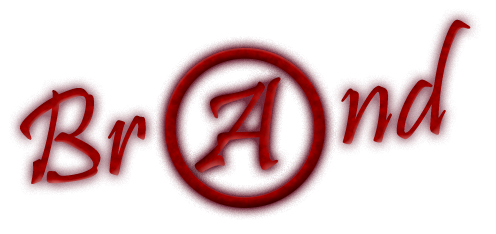
<style>
.page{position:relative;width:496px;height:234px;background:#ffffff}
.page>*{position:absolute;margin:0}
.t1{font:135px "Pristina-Regular";color:#930000}
.t2{font:135px "Pristina-Regular"}
</style>
<div class="page">
<p class="t1" style="left:20px;top:19px;width:451px;height:165px;rotate:-7deg">Br        nd</p>
<p class="t2" style="left:194px;top:77px;width:87px;height:96px">A</p>
</div>
